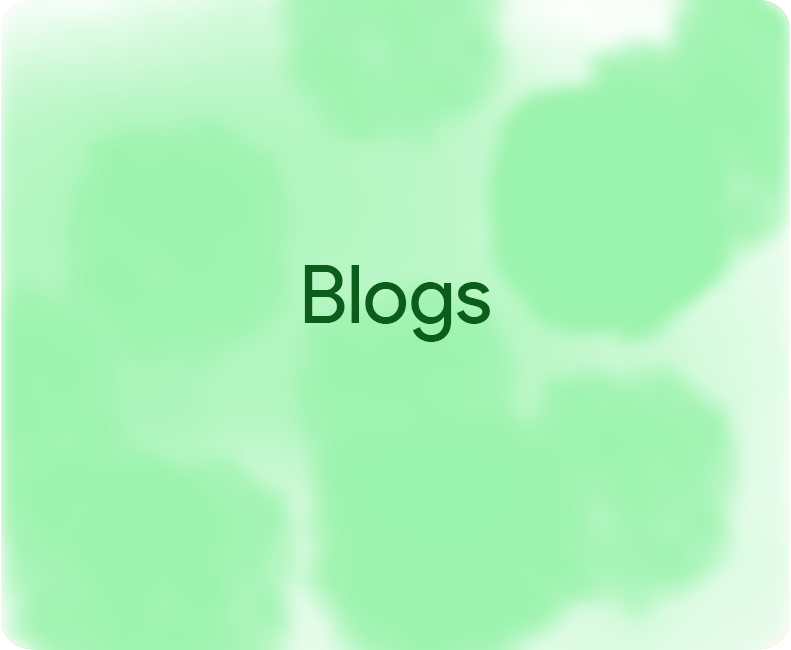
<style>
.page{position:relative;width:791px;height:650px}
.page>*{position:absolute;margin:0}
.t1{font:81.1px "ProductSans-Regular";color:#0b5d1b}
</style>
<div class="page">
<p class="t1" style="left:304px;top:265px;width:186px;height:77px">Blogs</p>
</div>
